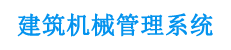
<style>
.page{position:relative;width:231px;height:50px;background:#ffffff}
.page>*{position:absolute;margin:0}
.t1{font:24px "SimSun";color:#0493ee;font-weight:bold}
</style>
<div class="page">
<p class="t1" style="left:17px;top:13px;width:196px;height:24px">建筑机械管理系统</p>
</div>
